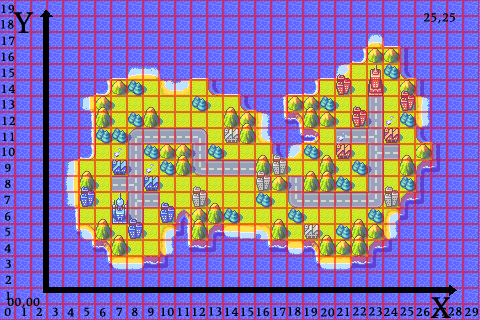
<style>
.page{position:relative;width:480px;height:320px;background:#705fff}
.page>*{position:absolute;margin:0}
.t1{font:14px "JCkg";letter-spacing:0.08em;color:#000000}
.t2{font:36px "JCkg";letter-spacing:0.05em;color:#000000}
.t3{font:14px "JCkg";letter-spacing:0.05em;color:#000000}
</style>
<div class="page">
<p class="t1" style="left:1px;top:4px;width:13px;height:10px">19</p>
<p class="t2" style="left:13px;top:12px;width:21px;height:21px">Y</p>
<p class="t3" style="left:424px;top:13px;width:31px;height:11px">25,25</p>
<p class="t1" style="left:1px;top:20px;width:13px;height:9px">18</p>
<p class="t1" style="left:2px;top:36px;width:13px;height:9px">17</p>
<p class="t1" style="left:1px;top:52px;width:13px;height:10px">16</p>
<p class="t1" style="left:2px;top:68px;width:13px;height:10px">15</p>
<p class="t1" style="left:2px;top:84px;width:13px;height:9px">14</p>
<p class="t1" style="left:2px;top:100px;width:13px;height:9px">13</p>
<p class="t1" style="left:2px;top:116px;width:13px;height:9px">12</p>
<p class="t1" style="left:2px;top:132px;width:13px;height:9px">11</p>
<p class="t1" style="left:2px;top:147px;width:13px;height:10px">10</p>
<p class="t1" style="left:4px;top:163px;width:7px;height:10px">9</p>
<p class="t1" style="left:4px;top:179px;width:7px;height:10px">8</p>
<p class="t1" style="left:4px;top:195px;width:6px;height:9px">7</p>
<p class="t1" style="left:5px;top:212px;width:6px;height:9px">6</p>
<p class="t1" style="left:5px;top:227px;width:6px;height:10px">5</p>
<p class="t1" style="left:4px;top:244px;width:7px;height:9px">4</p>
<p class="t1" style="left:5px;top:259px;width:6px;height:10px">3</p>
<p class="t1" style="left:5px;top:275px;width:6px;height:9px">2</p>
<p class="t1" style="left:6px;top:291px;width:5px;height:9px">1</p>
<p class="t3" style="left:7px;top:297px;width:33px;height:11px">00,00</p>
<p class="t2" style="left:430px;top:297px;width:21px;height:21px">X</p>
<p class="t1" style="left:4px;top:307px;width:7px;height:10px">0</p>
<p class="t1" style="left:22px;top:307px;width:5px;height:9px">1</p>
<p class="t1" style="left:36px;top:307px;width:6px;height:9px">2</p>
<p class="t1" style="left:52px;top:307px;width:6px;height:10px">3</p>
<p class="t1" style="left:67px;top:308px;width:7px;height:9px">4</p>
<p class="t1" style="left:84px;top:307px;width:6px;height:10px">5</p>
<p class="t1" style="left:100px;top:308px;width:6px;height:9px">6</p>
<p class="t1" style="left:116px;top:307px;width:6px;height:9px">7</p>
<p class="t1" style="left:131px;top:307px;width:7px;height:10px">8</p>
<p class="t1" style="left:147px;top:307px;width:7px;height:10px">9</p>
<p class="t1" style="left:161px;top:307px;width:13px;height:10px">10</p>
<p class="t1" style="left:177px;top:307px;width:13px;height:9px">11</p>
<p class="t1" style="left:192px;top:307px;width:13px;height:9px">12</p>
<p class="t1" style="left:209px;top:307px;width:13px;height:9px">13</p>
<p class="t1" style="left:225px;top:307px;width:13px;height:9px">14</p>
<p class="t1" style="left:241px;top:307px;width:13px;height:10px">15</p>
<p class="t1" style="left:256px;top:307px;width:13px;height:10px">16</p>
<p class="t1" style="left:273px;top:307px;width:13px;height:9px">17</p>
<p class="t1" style="left:288px;top:307px;width:13px;height:9px">18</p>
<p class="t1" style="left:304px;top:307px;width:13px;height:10px">19</p>
<p class="t1" style="left:321px;top:308px;width:14px;height:9px">20</p>
<p class="t1" style="left:337px;top:307px;width:13px;height:9px">21</p>
<p class="t1" style="left:353px;top:307px;width:13px;height:9px">22</p>
<p class="t1" style="left:369px;top:307px;width:13px;height:9px">23</p>
<p class="t1" style="left:384px;top:307px;width:14px;height:9px">24</p>
<p class="t1" style="left:400px;top:307px;width:14px;height:9px">25</p>
<p class="t1" style="left:416px;top:307px;width:14px;height:10px">26</p>
<p class="t1" style="left:433px;top:307px;width:13px;height:9px">27</p>
<p class="t1" style="left:448px;top:307px;width:14px;height:9px">28</p>
<p class="t1" style="left:465px;top:307px;width:13px;height:10px">29</p>
</div>
